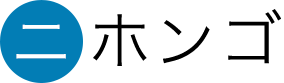
<style>
.page{position:relative;width:284px;height:83px;background:#ffffff}
.page>*{position:absolute;margin:0}
.t1{font:62px "HiraginoSans-W2";letter-spacing:0.05em;color:#000000}
.t2{font:62px "HiraginoSans-W2";letter-spacing:0.05em;color:#ffffff}
</style>
<div class="page">
<p class="t1" style="left:93px;top:9px;width:188px;height:57px">ホンゴ</p>
<p class="t2" style="left:16px;top:24px;width:50px;height:35px">ニ</p>
</div>
